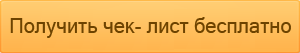
<style>
.page{position:relative;width:300px;height:53px}
.page>*{position:absolute;margin:0}
.t1{font:20px "MicrosoftSansSerif";color:#6d4300}
</style>
<div class="page">
<p class="t1" style="left:10px;top:17px;width:281px;height:21px">Получить чек- лист бесплатно</p>
</div>
